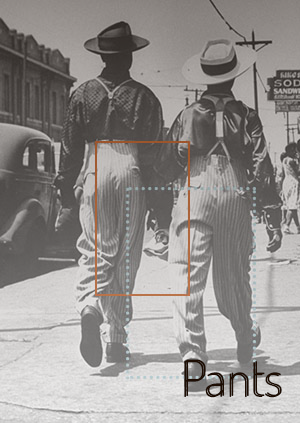
<style>
.page{position:relative;width:300px;height:423px}
.page>*{position:absolute;margin:0}
.t1{font:50px "Dosis-ExtraLight";color:#1d0d03}
</style>
<div class="page">
<p class="t1" style="left:184px;top:360px;width:96px;height:38px">Pants</p>
<p class="t1" style="left:186px;top:359px;width:96px;height:38px">Pants</p>
</div>
